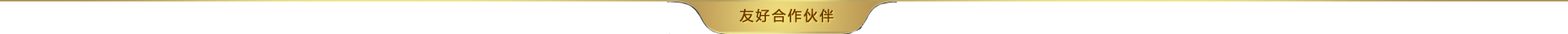
<style>
.page{position:relative;width:1568px;height:34px;background:#ffffff}
.page>*{position:absolute;margin:0}
.t1{font:13.8px "MicrosoftYaHei";letter-spacing:0.13em;color:#6d3806;font-weight:bold}
</style>
<div class="page">
<p class="t1" style="left:739px;top:8px;width:95px;height:15px">友好合作伙伴</p>
</div>
